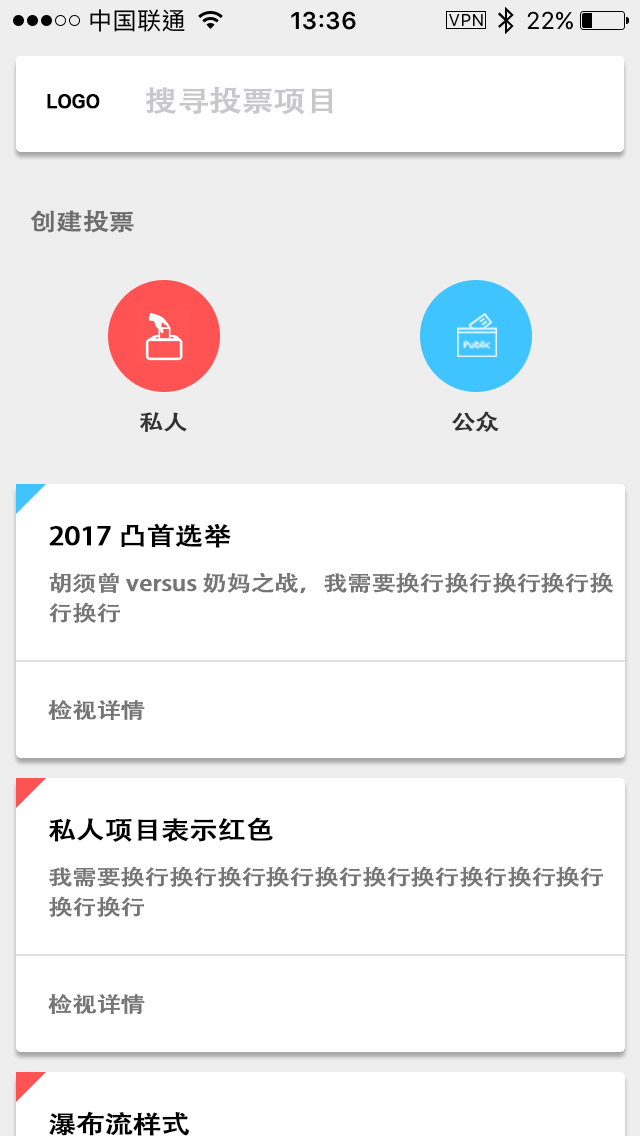
<style>
.page{position:relative;width:640px;height:1136px;background:#ffffff}
.page>*{position:absolute;margin:0}
.t1{font:28.5px "AdobeHeitiStd-Regular";letter-spacing:-0.02em;color:#c7c7cd;font-weight:bold;scale:1.12 1}
.t2{font:19.6px "ArialNarrow-Bold";letter-spacing:-0.02em;color:#000000;font-weight:bold;scale:1.12 1}
.t3{font:23.1px "AdobeHeitiStd-Regular";letter-spacing:-0.02em;color:#6d6d6d;font-weight:bold;scale:1.12 1}
.t4{font:21.4px "AdobeHeitiStd-Regular";letter-spacing:-0.02em;color:#313131;font-weight:bold;scale:1.12 1}
.t5{font:21.4px/30px "AdobeHeitiStd-Regular";letter-spacing:-0.02em;color:#757575;font-weight:bold;scale:1.12 1}
.t6{font:24.9px "AdobeHeitiStd-Regular";letter-spacing:-0.02em;color:#000000;font-weight:bold;scale:1.12 1}
.t7{font:21.4px "AdobeHeitiStd-Regular";letter-spacing:-0.02em;color:#757575;font-weight:bold;scale:1.12 1}
</style>
<div class="page">
<p class="t1" style="left:146px;top:86px;width:187px;height:29px">搜寻投票项目</p>
<p class="t2" style="left:47px;top:94px;width:53px;height:15px">LOGO</p>
<p class="t3" style="left:30px;top:210px;width:104px;height:23px">创建投票</p>
<p class="t4" style="left:140px;top:412px;width:47px;height:20px">私人</p>
<p class="t4" style="left:452px;top:411px;width:47px;height:21px">公众</p>
<p class="t5" style="left:49px;top:523px;width:564px;height:100px"><span class="t6">2017 凸首选举<br></span>胡须曾 versus 奶妈之战，我需要换行换行换行换行换行换行</p>
<p class="t7" style="left:48px;top:700px;width:97px;height:20px">检视详情</p>
<p class="t5" style="left:49px;top:817px;width:554px;height:100px"><span class="t6">私人项目表示红色<br></span>我需要换行换行换行换行换行换行换行换行换行换行换行换行</p>
<p class="t7" style="left:48px;top:994px;width:97px;height:20px">检视详情</p>
</div>
